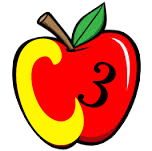
<style>
.page{position:relative;width:152px;height:151px;background:#ffffff}
.page>*{position:absolute;margin:0}
.t1{font:126.2px "HoboStd";color:#fff602;scale:0.74 1}
.t2{font:72px "PlantagenetCherokee";color:#060100}
</style>
<div class="page">
<p class="t1" style="left:16px;top:38px;width:68px;height:107px;rotate:-20deg">C</p>
<p class="t2" style="left:77px;top:61px;width:39px;height:47px;rotate:27deg">3</p>
</div>
